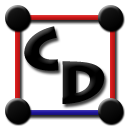
<style>
.page{position:relative;width:128px;height:128px;background:#ffffff}
.page>*{position:absolute;margin:0}
.t1{font:60px "LithosPro-Black";color:#000000}
</style>
<div class="page">
<p class="t1" style="left:24px;top:26px;width:35px;height:45px">C</p>
<p class="t1" style="left:62px;top:61px;width:43px;height:43px">D</p>
</div>
